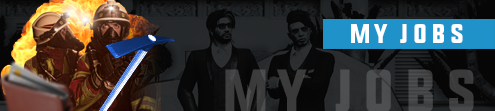
<style>
.page{position:relative;width:495px;height:111px}
.page>*{position:absolute;margin:0}
.t1{font:27px "UpboltersNew";letter-spacing:0.18em;color:#ffffff;text-transform:uppercase}
.t2{font:60.4px "UpboltersNew";letter-spacing:0.18em;color:#3f3f40;text-transform:uppercase}
</style>
<div class="page">
<p class="t1" style="left:351px;top:24px;width:112px;height:19px">My Jobs</p>
<p class="t2" style="left:225px;top:69px;width:249px;height:43px">My Jobs</p>
</div>
